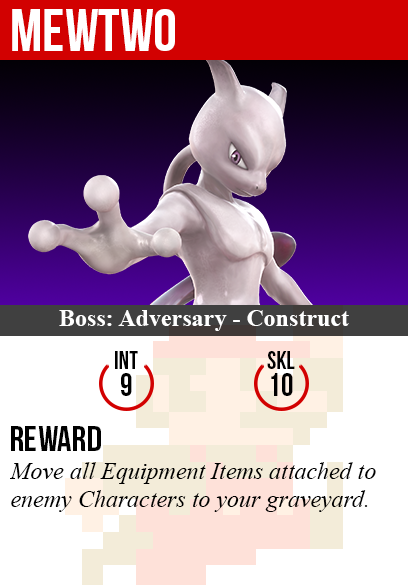
<style>
.page{position:relative;width:408px;height:585px;background:#ffffff}
.page>*{position:absolute;margin:0}
.t1{font:60px "BebasNeue";color:#ffffff}
.t2{font:24px "TimesNewRomanPS-BoldMT";color:#ffffff}
.t3{font:25px "BebasNeue";color:#000000}
.t4{font:32px "BebasNeue";color:#000000}
.t5{font:36px "BebasNeue";color:#000000}
.t6{font:24px "TimesNewRomanPS-ItalicMT";color:#000000}
</style>
<div class="page">
<p class="t1" style="left:12px;top:9px;width:163px;height:42px">mewtwo</p>
<p class="t2" style="left:59px;top:310px;width:290px;height:21px">Boss: Adversary - Construct</p>
<p class="t3" style="left:115px;top:351px;width:23px;height:18px">int</p>
<p class="t3" style="left:267px;top:351px;width:28px;height:18px">skl</p>
<p class="t4" style="left:121px;top:373px;width:11px;height:23px">9</p>
<p class="t4" style="left:271px;top:373px;width:22px;height:23px">10</p>
<p class="t5" style="left:11px;top:426px;width:90px;height:25px">reward</p>
<p class="t6" style="left:10px;top:462px;width:366px;height:50px">Move all Equipment Items attached to<br>enemy Characters to your graveyard.</p>
</div>
